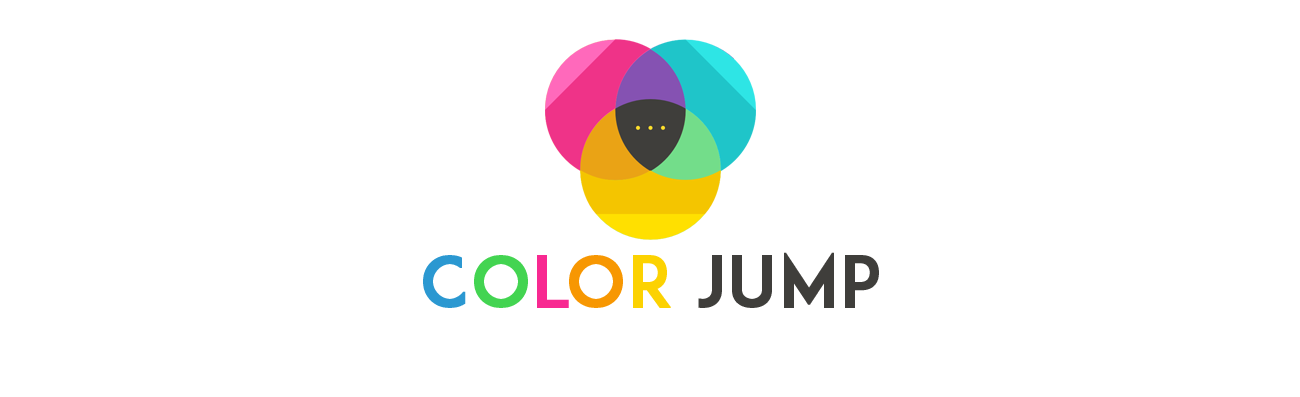
<style>
.page{position:relative;width:1300px;height:397px;background:#ffffff}
.page>*{position:absolute;margin:0}
.t1{font:120px "ADAM.CGPRO";color:#3f3e3b;font-weight:bold}
.t2{font:120px "ADAM.CGPRO";color:#2b98d1;font-weight:bold}
.t3{font:120px "ADAM.CGPRO";color:#43d451;font-weight:bold}
.t4{font:120px "ADAM.CGPRO";color:#f82991;font-weight:bold}
.t5{font:120px "ADAM.CGPRO";color:#f79702;font-weight:bold}
.t6{font:120px "ADAM.CGPRO";color:#fcd201;font-weight:bold}
</style>
<div class="page">
<p class="t1" style="left:423px;top:252px;width:456px;height:56px"><span class="t2">C</span><span class="t3">o</span><span class="t4">l</span><span class="t5">o</span><span class="t6">r </span>Jump</p>
</div>
